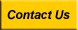
<style>
.page{position:relative;width:78px;height:30px;background:#ffcc00}
.page>*{position:absolute;margin:0}
.t1{font:12px "Arial-BoldItalicMT";color:#000000}
</style>
<div class="page">
<p class="t1" style="left:7px;top:10px;width:63px;height:10px">Contact Us</p>
</div>
